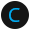
<style>
.page{position:relative;width:30px;height:30px;background:#151515}
.page>*{position:absolute;margin:0}
.t1{font:15.4px "MyriadPro-Regular";color:#00aaef;text-transform:uppercase}
</style>
<div class="page">
<p class="t1" style="left:9px;top:8px;width:11px;height:14px">c</p>
</div>
